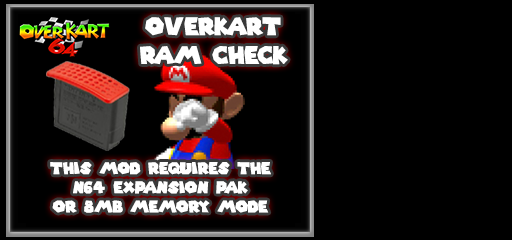
<style>
.page{position:relative;width:512px;height:240px;background:#000000}
.page>*{position:absolute;margin:0}
.t1{font:24px "SuperMarioGalaxy";color:#ffffff}
.t2{font:16px "SuperMarioGalaxy";color:#ffffff}
</style>
<div class="page">
<p class="t1" style="left:140px;top:17px;width:148px;height:48px;text-align:center">OverKart <br>RAM Check</p>
<p class="t2" style="left:50px;top:162px;width:221px;height:51px;text-align:center">This mod requires the <br>n64 expansion pak <br>or 8mb memory mode</p>
</div>
